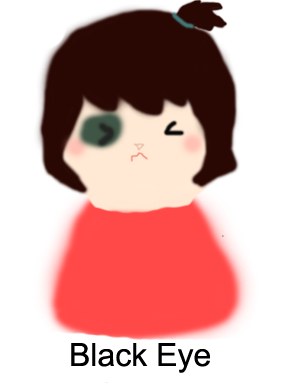
<style>
.page{position:relative;width:284px;height:383px;background:#ffffff}
.page>*{position:absolute;margin:0}
.t1{font:32px "ArialMT";color:#000000}
</style>
<div class="page">
<p class="t1" style="left:71px;top:343px;width:139px;height:30px">Black Eye</p>
</div>
